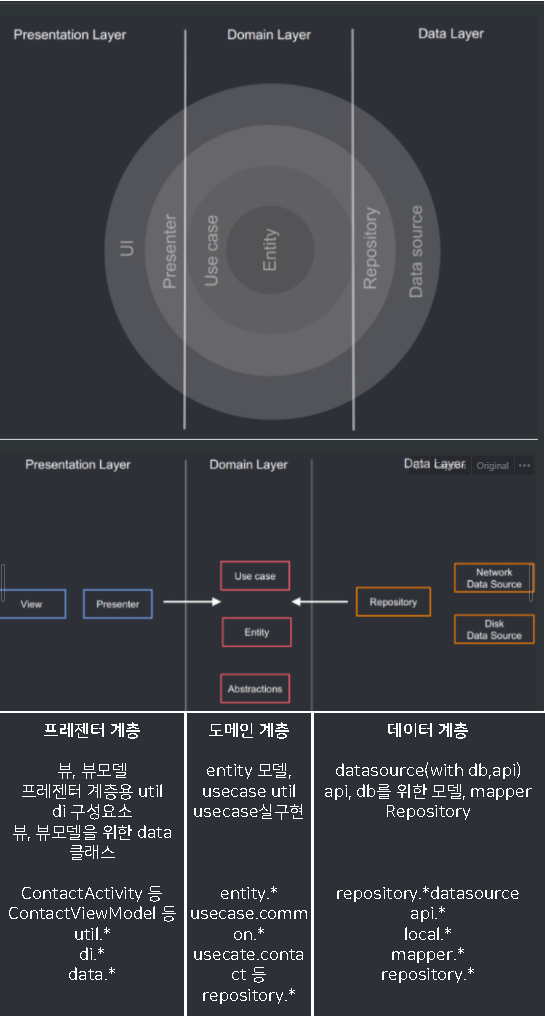
<style>
.page{position:relative;width:545px;height:1016px;background:#2e3037}
.page>*{position:absolute;margin:0}
.t1{font:17px "NanumSquareRoundOTFR";color:#ffffff}
.t2{font:17px "NanumSquareRoundOTFB";color:#ffffff}
</style>
<div class="page">
<p class="t1" style="left:9px;top:722px;width:167px;height:258px;text-align:center"><span class="t2">프레젠터 계층<br></span><br>뷰, 뷰모델<br>프레젠터 계층용 util<br>di 구성요소<br>뷰, 뷰모델을 위한 data클래스<br><br>ContactActivity 등<br>ContactViewModel 등<br>util.*<br>di.*<br>data.*</p>
<p class="t1" style="left:191px;top:722px;width:116px;height:282px;text-align:center"><span class="t2">도메인 계층<br></span><br>entity 모델,<br>usecase util<br>usecase실구현<br><br><br><br>entity.*<br>usecase.comm<br>on.*<br>usecate.conta<br>ct 등<br>repository.*</p>
<p class="t1" style="left:325px;top:722px;width:207px;height:261px;text-align:center"><span class="t2">데이터 계층<br></span><br>datasource(with db,api)<br>api, db를 위한 모델, mapper<br>Repository<br><br><br><br>repository.*datasource<br>api.*<br>local.*<br>mapper.*<br>repository.*</p>
</div>
